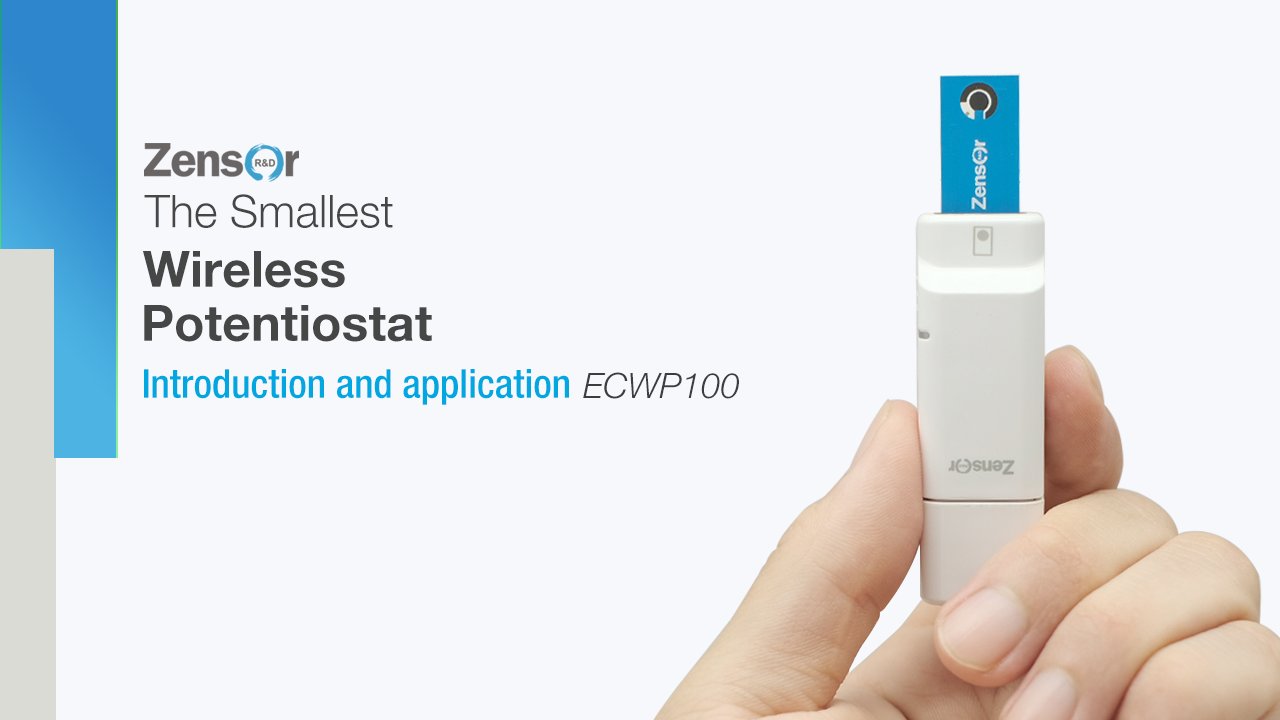
<style>
.page{position:relative;width:1280px;height:720px;background:#f7f8fc}
.page>*{position:absolute;margin:0}
.t1{font:45px "HelveticaNeueLTPro-Lt";color:#464646}
.t2{font:50px "HelveticaNeueLTPro-Bd";color:#464646}
.t3{font:40px "HelveticaNeueLTPro-MdCn";color:#00a7e1}
.t4{font:35px "HelveticaNeueLTPro-LtIt";color:#3d3d3d}
</style>
<div class="page">
<p class="t1" style="left:144px;top:194px;width:249px;height:34px">The Smallest</p>
<p class="t2" style="left:143px;top:251px;width:202px;height:37px">Wireless</p>
<p class="t2" style="left:144px;top:305px;width:288px;height:37px">Potentiostat</p>
<p class="t3" style="left:144px;top:369px;width:425px;height:36px">Introduction and application</p>
<p class="t4" style="left:583px;top:372px;width:156px;height:27px">ECWP100</p>
</div>
